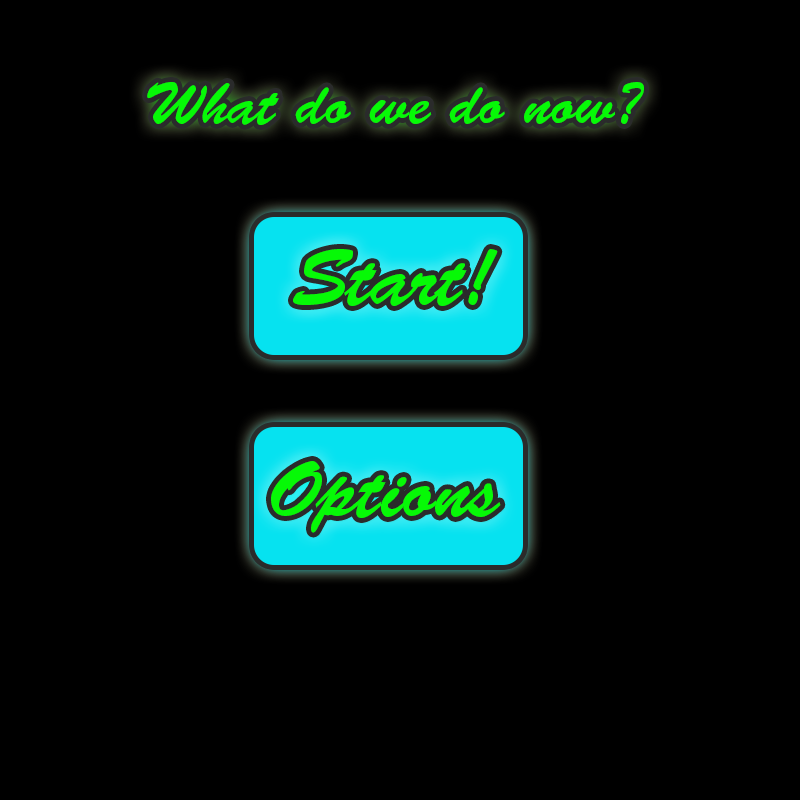
<style>
.page{position:relative;width:800px;height:800px;background:#000000}
.page>*{position:absolute;margin:0}
.t1{font:60px "BrushScriptStd";color:#06f906}
.t2{font:80px "BrushScriptStd";color:#06f906}
</style>
<div class="page">
<p class="t1" style="left:147px;top:82px;width:497px;height:43px">What do we do now?</p>
<p class="t2" style="left:293px;top:249px;width:205px;height:57px">Start!</p>
<p class="t2" style="left:271px;top:461px;width:230px;height:72px">Options</p>
</div>
